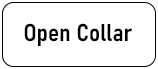
<style>
.page{position:relative;width:158px;height:69px;background:#ffffff}
.page>*{position:absolute;margin:0}
.t1{font:24px "Bahnschrift-SemiBoldSemiCondensed";color:#000000}
</style>
<div class="page">
<p class="t1" style="left:24px;top:23px;width:108px;height:23px">Open Collar</p>
</div>
